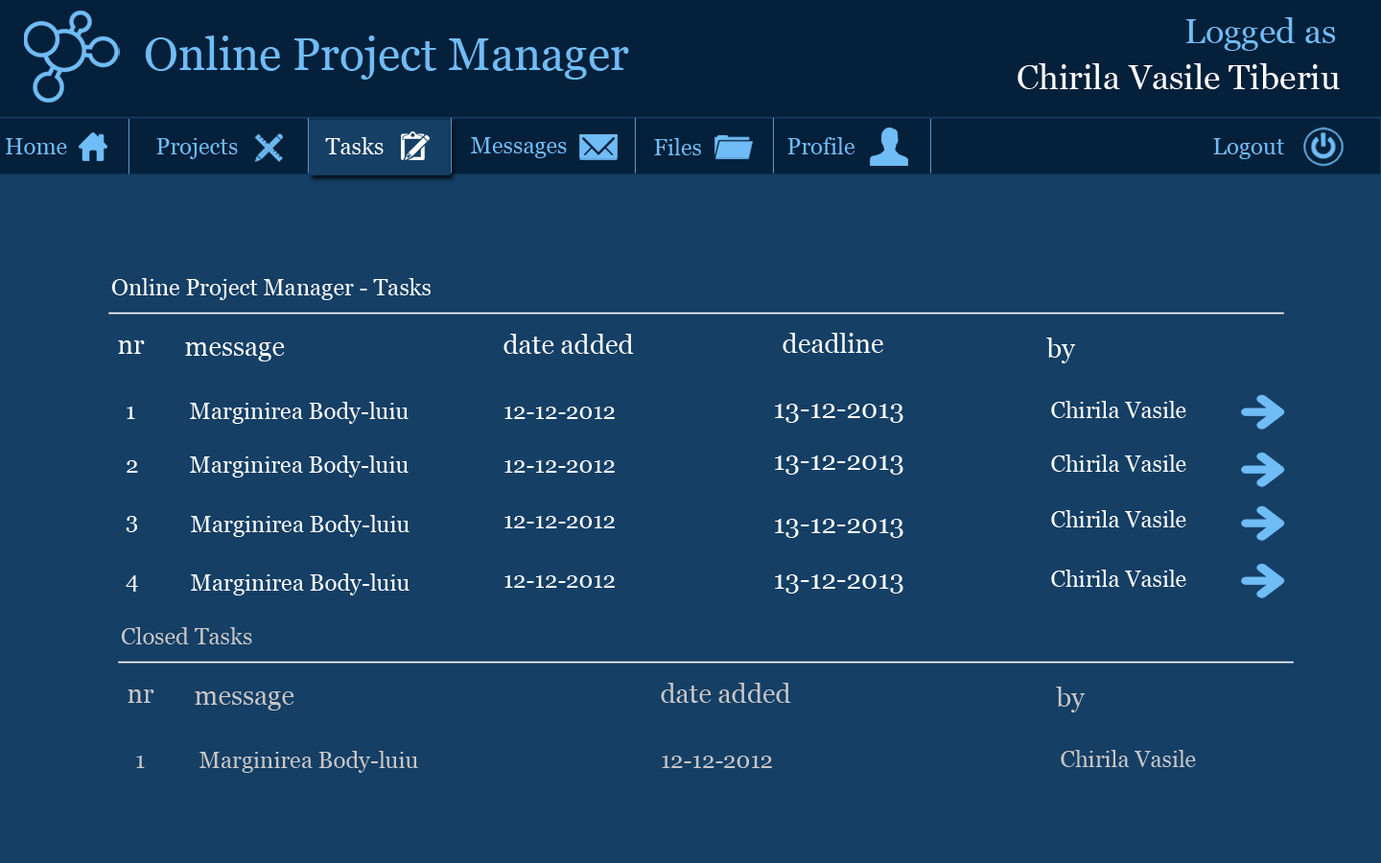
<style>
.page{position:relative;width:1381px;height:863px;background:#153f65}
.page>*{position:absolute;margin:0}
.t1{font:34.5px "Georgia";color:#70bcf6}
.t2{font:46px "Georgia";color:#70bcf6}
.t3{font:34.5px "Georgia";color:#fefefe}
.t4{font:23px "Georgia";color:#ffffff}
.t5{font:23px "Georgia";color:#70bcf6}
.t6{font:26.9px "Georgia";color:#ffffff}
.t7{font:23px "Georgia";color:#c9c6c6}
.t8{font:26.9px "Georgia";color:#c9c6c6}
</style>
<div class="page">
<p class="t1" style="left:1186px;top:17px;width:150px;height:34px">Logged as</p>
<p class="t2" style="left:145px;top:35px;width:484px;height:45px">Online Project Manager</p>
<p class="t3" style="left:1018px;top:63px;width:322px;height:26px">Chirila Vasile Tiberiu</p>
<p class="t4" style="left:325px;top:137px;width:59px;height:17px">Tasks</p>
<p class="t5" style="left:471px;top:137px;width:96px;height:21px">Messages</p>
<p class="t5" style="left:788px;top:137px;width:67px;height:17px">Profile</p>
<p class="t5" style="left:6px;top:138px;width:61px;height:16px">Home</p>
<p class="t5" style="left:156px;top:138px;width:82px;height:21px">Projects</p>
<p class="t5" style="left:654px;top:138px;width:47px;height:17px">Files</p>
<p class="t5" style="left:1213px;top:138px;width:71px;height:21px">Logout</p>
<p class="t4" style="left:111px;top:278px;width:320px;height:22px">Online Project Manager - Tasks</p>
<p class="t6" style="left:118px;top:341px;width:27px;height:13px">nr</p>
<p class="t6" style="left:504px;top:334px;width:130px;height:20px">date added</p>
<p class="t6" style="left:783px;top:333px;width:100px;height:20px">deadline</p>
<p class="t6" style="left:1046px;top:338px;width:30px;height:26px">by</p>
<p class="t6" style="left:185px;top:342px;width:100px;height:20px">message</p>
<p class="t4" style="left:190px;top:402px;width:219px;height:22px">Marginirea Body-luiu</p>
<p class="t4" style="left:1051px;top:401px;width:136px;height:17px">Chirila Vasile</p>
<p class="t4" style="left:127px;top:407px;width:8px;height:12px">1</p>
<p class="t4" style="left:505px;top:407px;width:110px;height:12px">12-12-2012</p>
<p class="t6" style="left:775px;top:404px;width:129px;height:19px">13-12-2013</p>
<p class="t4" style="left:127px;top:460px;width:11px;height:13px">2</p>
<p class="t4" style="left:190px;top:456px;width:219px;height:22px">Marginirea Body-luiu</p>
<p class="t4" style="left:505px;top:460px;width:110px;height:13px">12-12-2012</p>
<p class="t6" style="left:775px;top:456px;width:129px;height:19px">13-12-2013</p>
<p class="t4" style="left:1051px;top:455px;width:136px;height:17px">Chirila Vasile</p>
<p class="t4" style="left:126px;top:516px;width:11px;height:16px">3</p>
<p class="t4" style="left:191px;top:515px;width:219px;height:22px">Marginirea Body-luiu</p>
<p class="t4" style="left:505px;top:516px;width:110px;height:13px">12-12-2012</p>
<p class="t6" style="left:775px;top:519px;width:129px;height:19px">13-12-2013</p>
<p class="t4" style="left:1051px;top:510px;width:136px;height:18px">Chirila Vasile</p>
<p class="t4" style="left:1051px;top:570px;width:136px;height:17px">Chirila Vasile</p>
<p class="t4" style="left:126px;top:576px;width:12px;height:16px">4</p>
<p class="t4" style="left:191px;top:574px;width:219px;height:22px">Marginirea Body-luiu</p>
<p class="t4" style="left:505px;top:576px;width:110px;height:12px">12-12-2012</p>
<p class="t6" style="left:775px;top:575px;width:129px;height:19px">13-12-2013</p>
<p class="t7" style="left:121px;top:627px;width:131px;height:18px">Closed Tasks</p>
<p class="t8" style="left:128px;top:690px;width:26px;height:13px">nr</p>
<p class="t8" style="left:661px;top:683px;width:130px;height:20px">date added</p>
<p class="t8" style="left:1056px;top:687px;width:30px;height:26px">by</p>
<p class="t8" style="left:195px;top:692px;width:99px;height:19px">message</p>
<p class="t7" style="left:136px;top:756px;width:9px;height:12px">1</p>
<p class="t7" style="left:200px;top:751px;width:218px;height:22px">Marginirea Body-luiu</p>
<p class="t7" style="left:662px;top:756px;width:110px;height:12px">12-12-2012</p>
<p class="t7" style="left:1061px;top:750px;width:135px;height:17px">Chirila Vasile</p>
</div>
